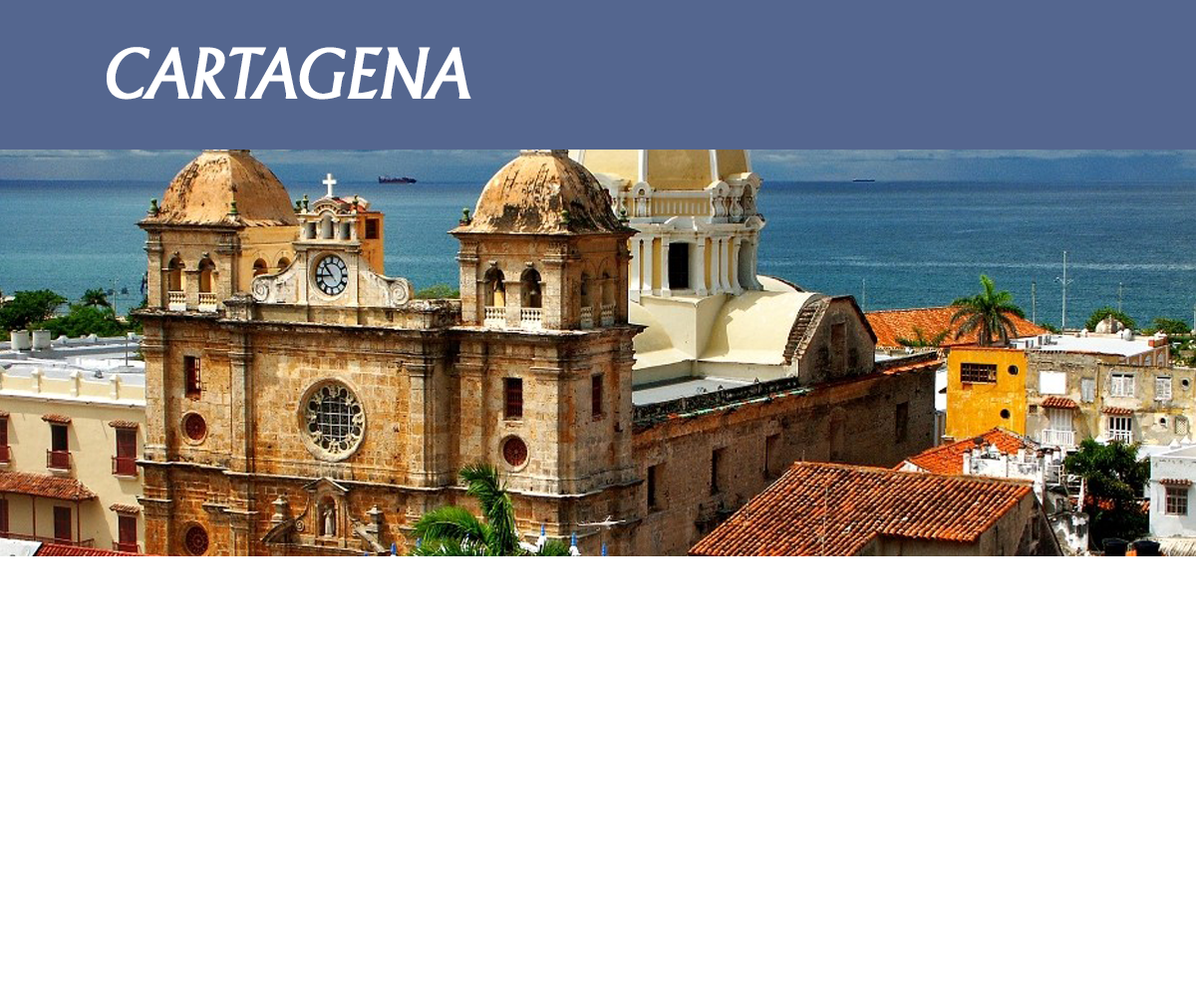
<style>
.page{position:relative;width:1196px;height:997px;background:#ffffff}
.page>*{position:absolute;margin:0}
.t1{font:69.8px "Adelon-Regular";color:#ffffff;text-transform:uppercase;font-weight:bold;font-style:italic;scale:0.93 1}
</style>
<div class="page">
<p class="t1" style="left:107px;top:47px;width:365px;height:53px">Cartagena</p>
</div>
